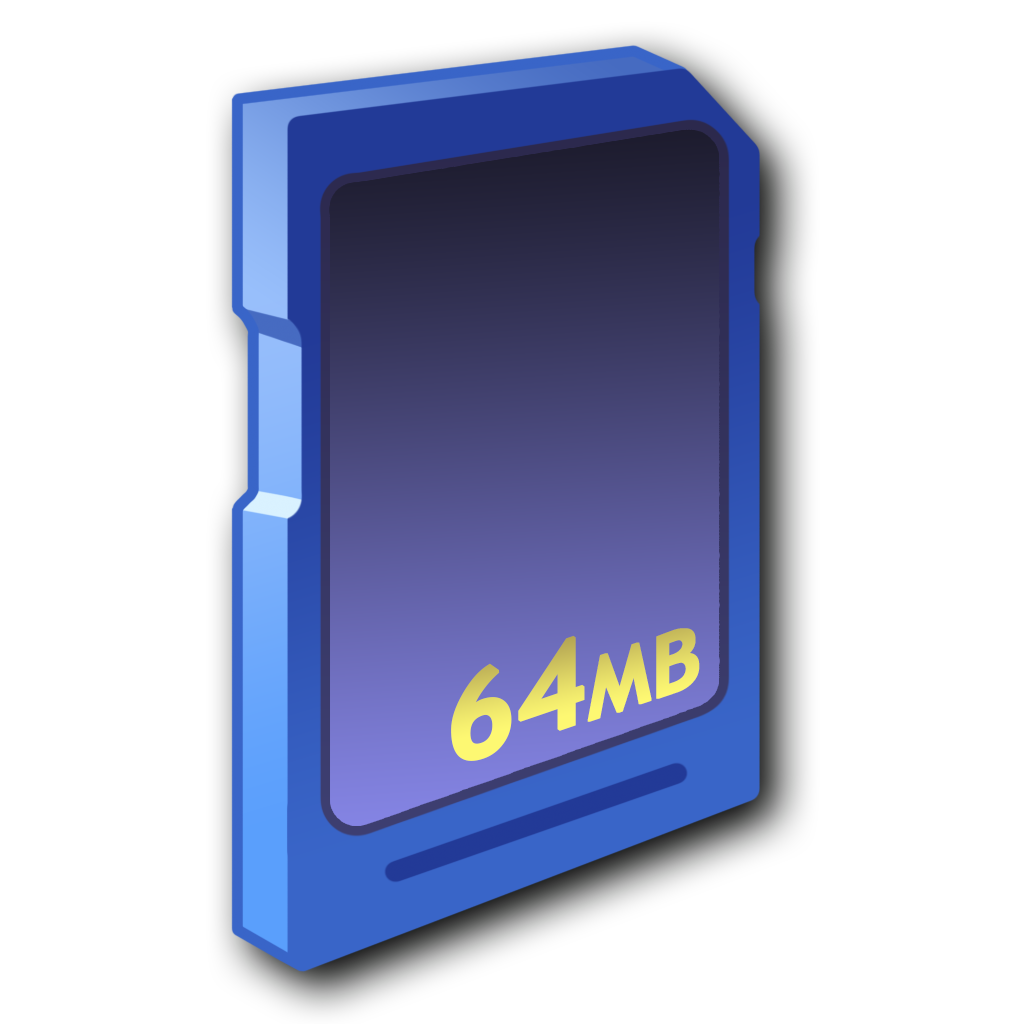
<style>
.page{position:relative;width:1024px;height:1024px;background:#ffffff}
.page>*{position:absolute;margin:0}
.t1{font:120.8px "TrebuchetMS-Bold";letter-spacing:-0.025em;color:#eee76c;font-weight:bold;scale:1.06 1}
.t2{font:120.8px "TrebuchetMS-Bold";letter-spacing:-0.025em;color:#eee76c;font-variant:small-caps;font-weight:bold;scale:1.06 1}
</style>
<div class="page">
<p class="t1" style="left:451px;top:628px;width:249px;height:133px;rotate:-19deg">64<span class="t2">mb</span></p>
</div>
